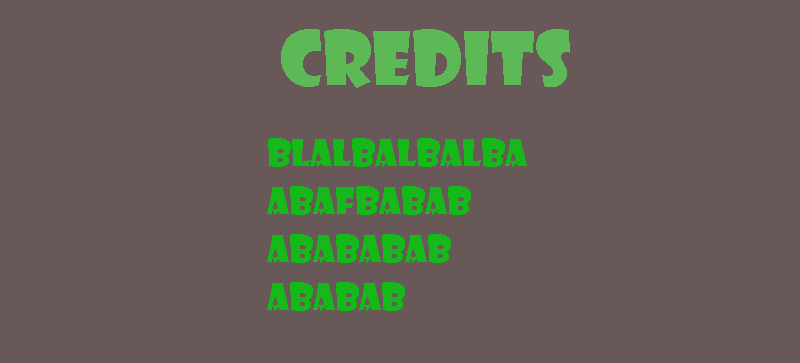
<style>
.page{position:relative;width:800px;height:363px;background:#685858}
.page>*{position:absolute;margin:0}
.t1{font:72px "ShowcardGothic-Reg";color:#5cb955}
.t2{font:36px/48px "ShowcardGothic-Reg";color:#16b91a}
</style>
<div class="page">
<p class="t1" style="left:281px;top:29px;width:289px;height:59px">credits</p>
<p class="t2" style="left:267px;top:138px;width:260px;height:173px">blalbalbalba<br>abafbabab<br>abababab<br>ababab</p>
</div>
